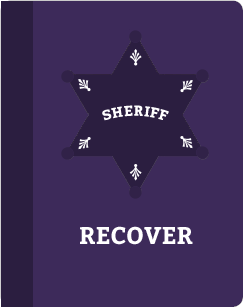
<style>
.page{position:relative;width:243px;height:307px;background:#3d2a5a}
.page>*{position:absolute;margin:0}
.t1{font:14px "Bitter-Bold";color:#ffffff}
.t2{font:24px "Bitter-Bold";color:#ffffff}
</style>
<div class="page">
<p class="t1" style="left:102px;top:105px;width:67px;height:16px">SHERIFF</p>
<p class="t2" style="left:80px;top:226px;width:113px;height:19px">RECOVER</p>
</div>
